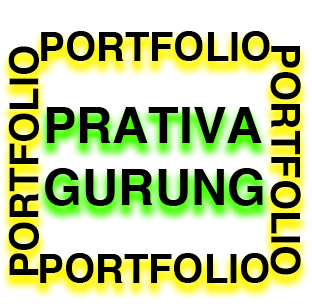
<style>
.page{position:relative;width:312px;height:304px;background:#ffffff}
.page>*{position:absolute;margin:0}
.t1{font:40px "Helvetica-Bold";color:#000000}
.t2{font:50px "Helvetica-Bold";color:#000000}
</style>
<div class="page">
<p class="t1" style="left:41px;top:31px;width:229px;height:30px">PORTFOLIO</p>
<p class="t1" style="left:8px;top:46px;width:31px;height:229px;rotate:-90deg">PORTFOLIO</p>
<p class="t1" style="left:270px;top:46px;width:31px;height:229px;rotate:90deg">PORTFOLIO</p>
<p class="t2" style="left:46px;top:107px;width:216px;height:36px">PRATIVA</p>
<p class="t2" style="left:45px;top:168px;width:218px;height:38px">GURUNG</p>
<p class="t1" style="left:40px;top:253px;width:229px;height:30px">PORTFOLIO</p>
</div>
